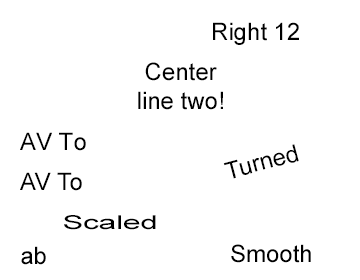
<style>
.page{position:relative;width:360px;height:280px;background:#ffffff}
.page>*{position:absolute;margin:0}
.t1{font:24px "ArialMT";color:#000000}
.t2{font:19.2px "ArialMT";color:#000000;scale:1.63 1}
</style>
<div class="page">
<p class="t1" style="left:213px;top:22px;width:86px;height:23px">Right 12</p>
<p class="t1" style="left:138px;top:62px;width:85px;height:48px;text-align:center">Center<br>line two!</p>
<p class="t1" style="left:20px;top:132px;width:66px;height:19px">AV To</p>
<p class="t1" style="left:223px;top:144px;width:76px;height:35px;rotate:-15deg">Turned</p>
<p class="t1" style="left:20px;top:172px;width:62px;height:19px">AV To</p>
<p class="t2" style="left:64px;top:215px;width:92px;height:15px">Scaled</p>
<p class="t1" style="left:21px;top:246px;width:25px;height:19px">ab</p>
<p class="t1" style="left:231px;top:244px;width:80px;height:19px">Smooth</p>
</div>
